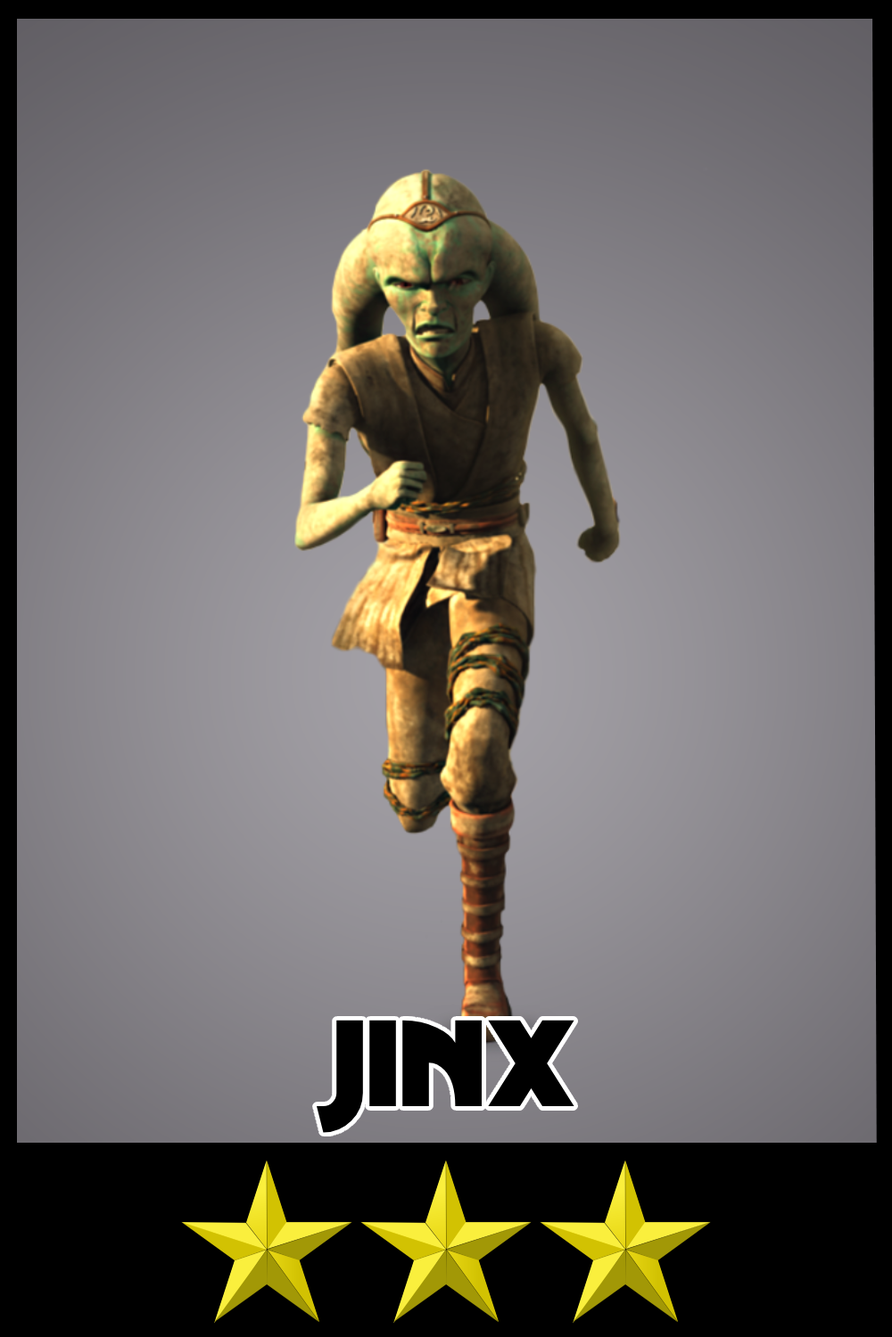
<style>
.page{position:relative;width:892px;height:1337px}
.page>*{position:absolute;margin:0}
.t1{font:131.9px "DistantGalaxy";color:#000000}
</style>
<div class="page">
<p class="t1" style="left:317px;top:1020px;width:257px;height:113px">jinx</p>
</div>
